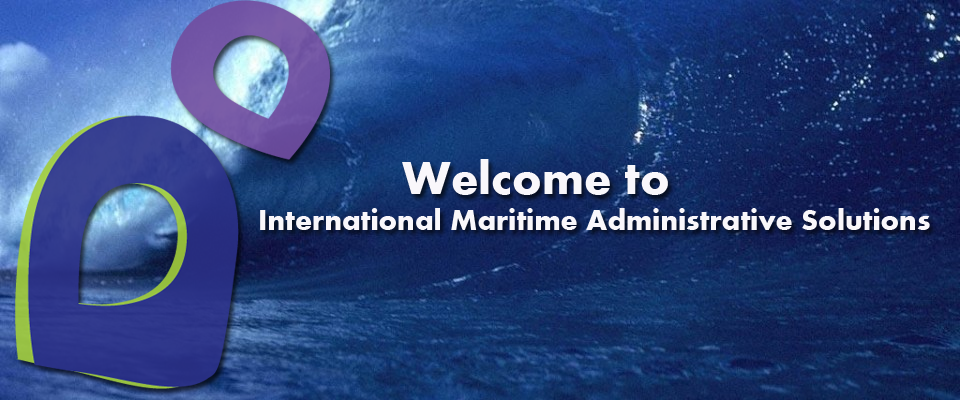
<style>
.page{position:relative;width:960px;height:400px}
.page>*{position:absolute;margin:0}
.t1{font:30px "Aharoni-Bold";color:#f9f7fb}
.t2{font:30px "Aharoni-Bold";color:#000000}
.t3{font:48px "Aharoni-Bold";color:#f9f7fb}
</style>
<div class="page">
<p class="t1" style="left:260px;top:159px;width:670px;height:71px"><span class="t2">    </span><span class="t3">Welcome to<br></span>International Maritime Administrative Solutions</p>
</div>
